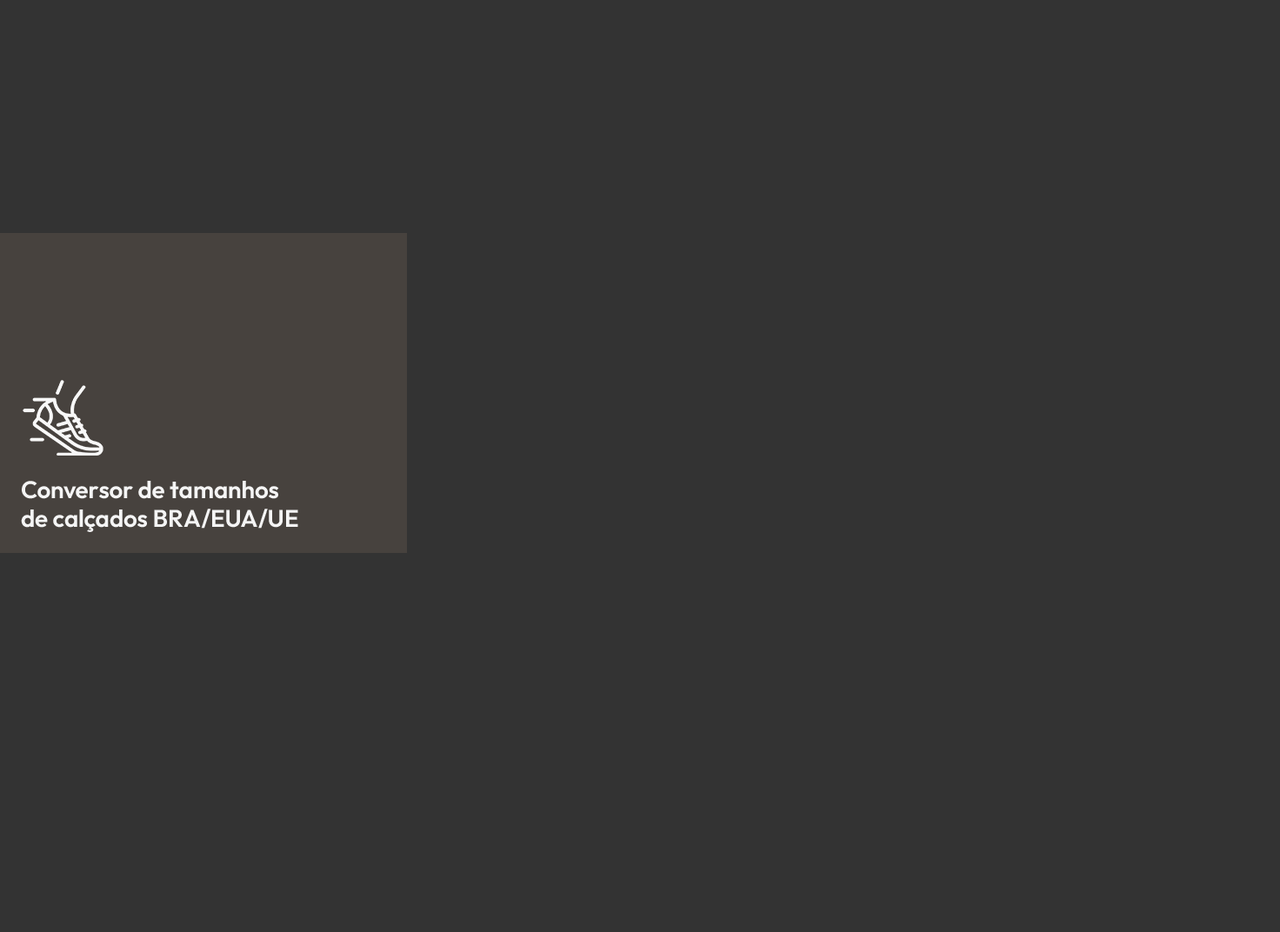
<style>
.page{position:relative;width:1280px;height:932px;background:#333333}
.page>*{position:absolute;margin:0}
.t1{font:24.1px/29px "Outfit-SemiBold";color:#f5f5f5}
</style>
<div class="page">
<p class="t1" style="left:21px;top:481px;width:277px;height:51px">Conversor de tamanhos<br>de calçados BRA/EUA/UE</p>
</div>
